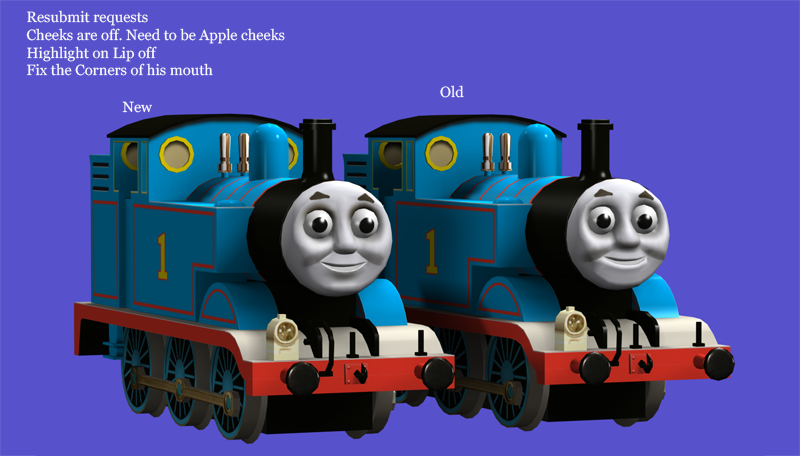
<style>
.page{position:relative;width:800px;height:456px;background:#5751cc}
.page>*{position:absolute;margin:0}
.t1{font:14.8px "Georgia";color:#fafafa}
</style>
<div class="page">
<p class="t1" style="left:26px;top:10px;width:259px;height:66px">Resubmit requests<br>Cheeks are off. Need to be Apple cheeks<br>Highlight on Lip off<br>Fix the Corners of his mouth</p>
<p class="t1" style="left:440px;top:85px;width:24px;height:13px">Old</p>
<p class="t1" style="left:122px;top:101px;width:31px;height:12px">New</p>
</div>
